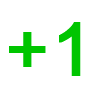
<style>
.page{position:relative;width:100px;height:100px;background:#ffffff}
.page>*{position:absolute;margin:0}
.t1{font:73px "ArialMT";letter-spacing:0.02em;color:#00c500;font-weight:bold}
</style>
<div class="page">
<p class="t1" style="left:9px;top:22px;width:72px;height:54px">+1</p>
</div>
